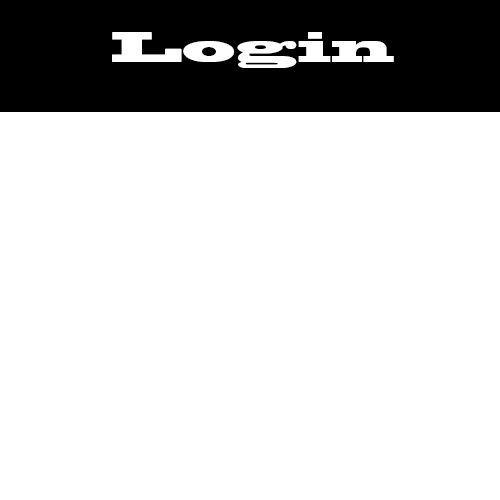
<style>
.page{position:relative;width:500px;height:500px;background:#ffffff}
.page>*{position:absolute;margin:0}
.t1{font:40px "BlackoakStd";color:#ffffff}
</style>
<div class="page">
<p class="t1" style="left:112px;top:32px;width:282px;height:36px">Login</p>
</div>
